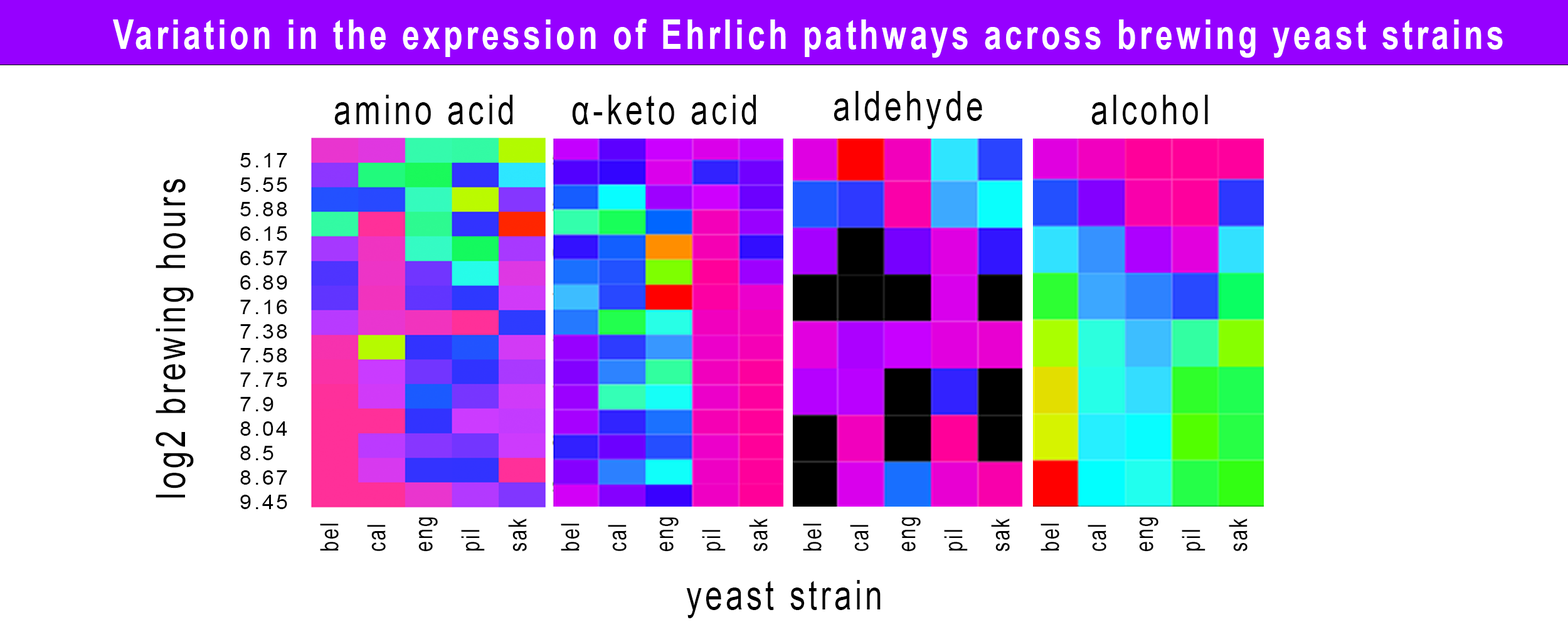
<style>
.page{position:relative;width:1568px;height:627px;background:#ffffff}
.page>*{position:absolute;margin:0}
.t1{font:40.6px "Arial-BoldMT";letter-spacing:0.1em;color:#ffffff;scale:0.78 1}
.t2{font:40.6px "ArialMT";letter-spacing:0.1em;color:#000000;scale:0.78 1}
.t3{font:20.3px "ArialMT";letter-spacing:0.1em;color:#000000;scale:1.06 1}
.t4{font:25.1px/47px "ArialMT";letter-spacing:0.1em;color:#000000;scale:0.76 1}
</style>
<div class="page">
<p class="t1" style="left:113px;top:19px;width:1390px;height:39px">Variation in the expression of Ehrlich pathways across brewing yeast strains</p>
<p class="t2" style="left:334px;top:95px;width:179px;height:30px">amino acid</p>
<p class="t2" style="left:572px;top:95px;width:184px;height:30px">α-keto acid</p>
<p class="t2" style="left:834px;top:91px;width:148px;height:38px">aldehyde</p>
<p class="t2" style="left:1091px;top:95px;width:117px;height:30px">alcohol</p>
<p class="t3" style="left:240px;top:153px;width:47px;height:356px">5.17<br>5.55<br>5.88<br>6.15<br>6.57<br>6.89<br>7.16<br>7.38<br>7.58<br>7.75<br>7.9<br>8.04<br>8.5<br>8.67<br>9.45</p>
<p class="t2" style="left:156px;top:179px;width:38px;height:319px;rotate:-90deg">log2 brewing hours</p>
<p class="t4" style="left:320px;top:517px;width:207px;height:34px;rotate:-90deg">bel<br>cal<br>eng<br>pil<br>sak</p>
<p class="t4" style="left:561px;top:517px;width:207px;height:34px;rotate:-90deg">bel<br>cal<br>eng<br>pil<br>sak</p>
<p class="t4" style="left:803px;top:517px;width:207px;height:34px;rotate:-90deg">bel<br>cal<br>eng<br>pil<br>sak</p>
<p class="t4" style="left:1041px;top:517px;width:207px;height:34px;rotate:-90deg">bel<br>cal<br>eng<br>pil<br>sak</p>
<p class="t2" style="left:686px;top:580px;width:195px;height:38px">yeast strain</p>
</div>
